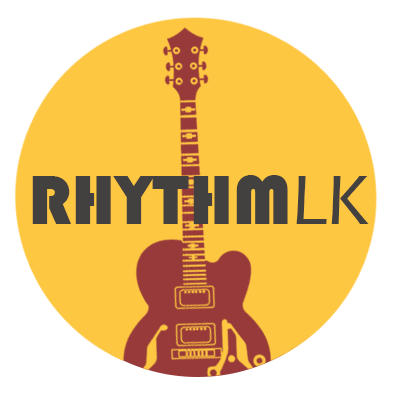
<style>
.page{position:relative;width:398px;height:399px;background:#fec741}
.page>*{position:absolute;margin:0}
.t1{font:72px "Bauhaus93";color:#434040}
.t2{font:72px "ErasITC-Medium";color:#434040}
</style>
<div class="page">
<p class="t1" style="left:32px;top:175px;width:337px;height:49px">RHYTHM<span class="t2">LK</span></p>
</div>
